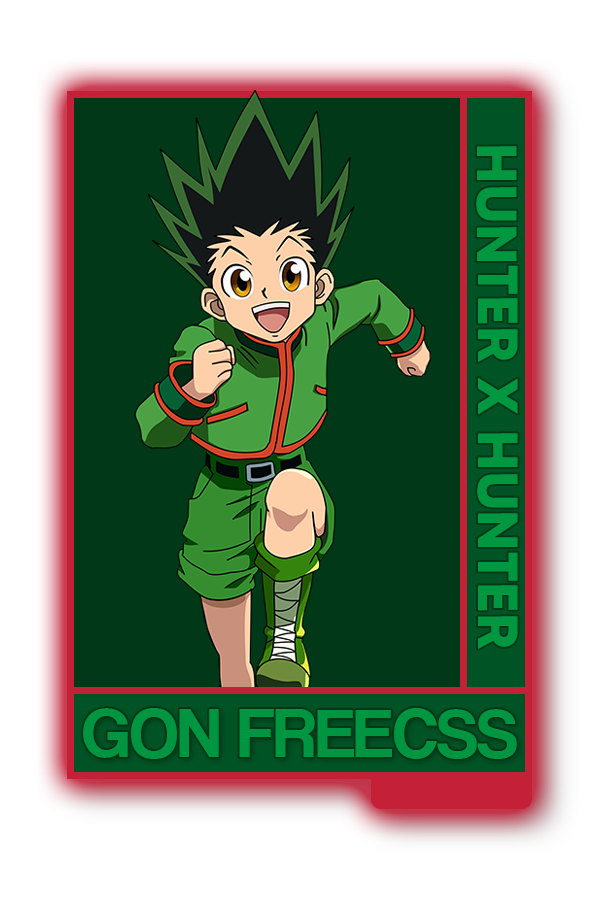
<style>
.page{position:relative;width:600px;height:900px;background:#003818}
.page>*{position:absolute;margin:0}
.t1{font:56.5px "MADETOMMY-Bold";color:#009741}
.t2{font:72px "CoolveticaRg-Regular";color:#009641}
</style>
<div class="page">
<p class="t1" style="left:476px;top:146px;width:42px;height:503px;rotate:90deg">HUNTER X HUNTER</p>
<p class="t2" style="left:83px;top:708px;width:434px;height:51px">GON FREECSS</p>
</div>
